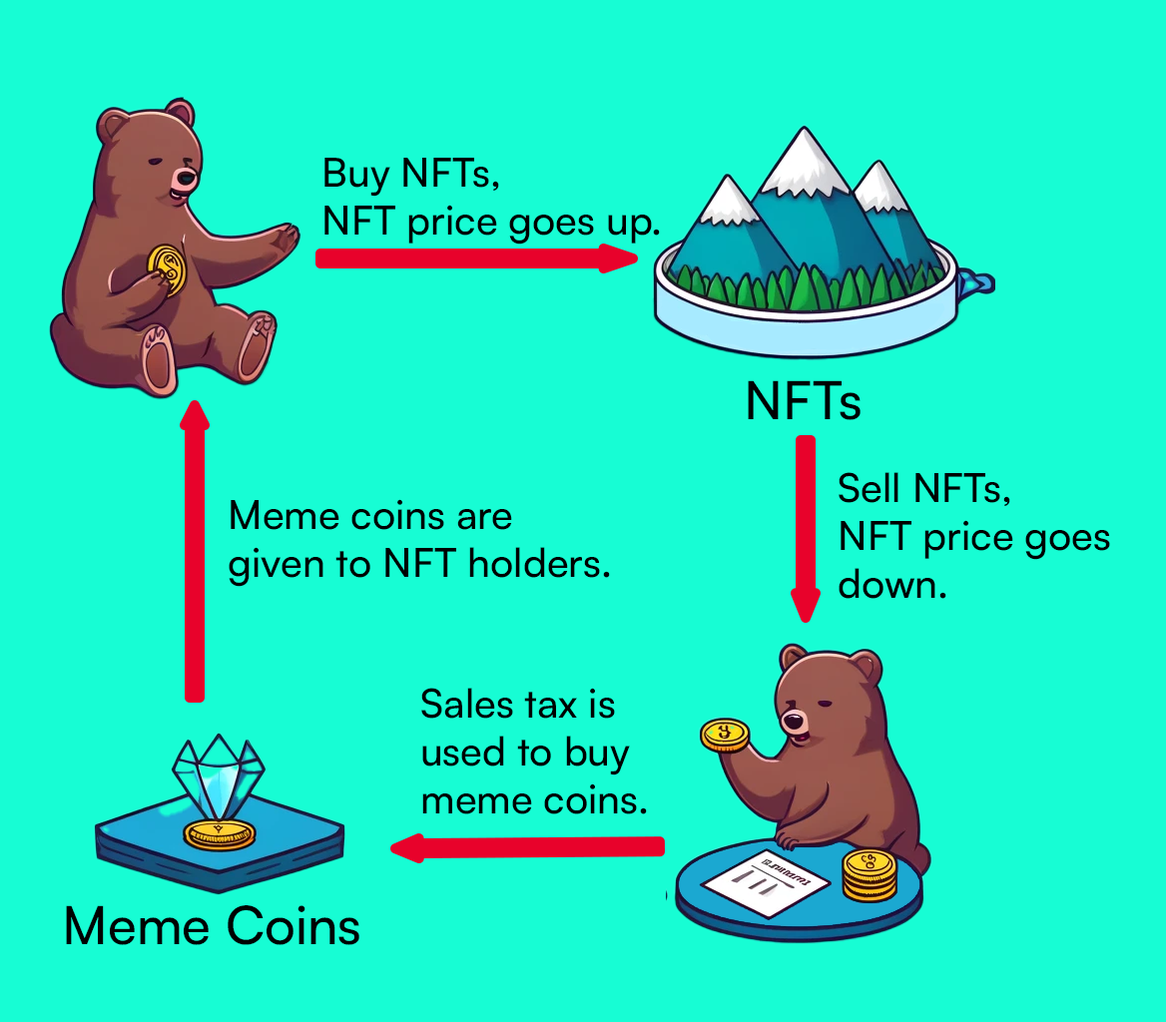
<style>
.page{position:relative;width:1166px;height:1022px;background:#17fdd4}
.page>*{position:absolute;margin:0}
.t1{font:39.9px "Satoshi-Medium";color:#000000}
.t2{font:52.9px "Satoshi-Medium";color:#000000}
</style>
<div class="page">
<p class="t1" style="left:325px;top:158px;width:335px;height:87px">Buy NFTs, <br>NFT price goes up.</p>
<p class="t2" style="left:748px;top:380px;width:113px;height:40px">NFTs</p>
<p class="t1" style="left:839px;top:472px;width:271px;height:127px">Sell NFTs, <br>NFT price goes <br>down.</p>
<p class="t1" style="left:229px;top:499px;width:381px;height:88px">Meme coins are<br>given to NFT holders.</p>
<p class="t1" style="left:421px;top:688px;width:226px;height:127px">Sales tax is <br>used to buy<br>meme coins.</p>
<p class="t2" style="left:66px;top:906px;width:293px;height:40px">Meme Coins</p>
</div>
